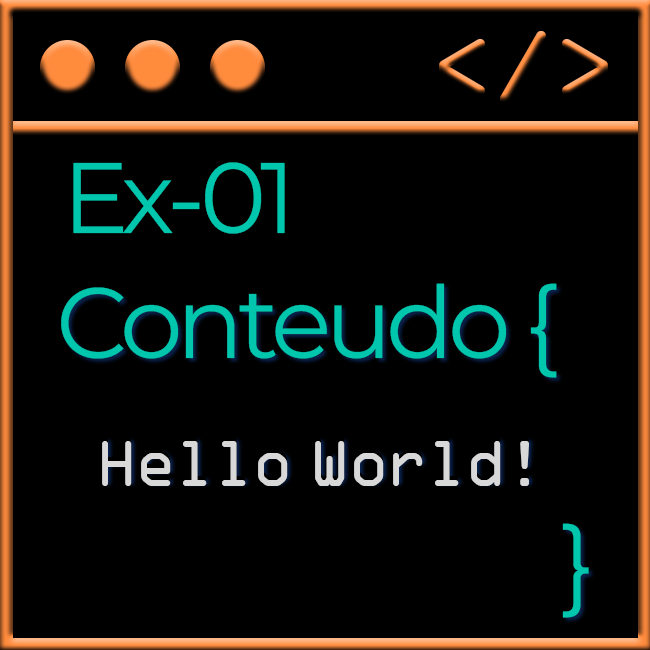
<style>
.page{position:relative;width:650px;height:650px;background:#000000}
.page>*{position:absolute;margin:0}
.t1{font:110px "OCRAbyBT-Regular";letter-spacing:-0.06em}
.t2{font:100px "MontserratThin-Regular";letter-spacing:-0.06em;color:#00c6ae}
.t3{font:70px "OCRAbyBT-Regular";letter-spacing:-0.06em;color:#d8d8d8}
</style>
<div class="page">
<p class="t1" style="left:439px;top:31px;width:169px;height:72px">&lt;/&gt;</p>
<p class="t2" style="left:73px;top:162px;width:212px;height:72px">Ex-01</p>
<p class="t2" style="left:61px;top:283px;width:528px;height:335px">Conteudo {<br><br>                         }</p>
<p class="t2" style="left:61px;top:283px;width:528px;height:335px">Conteudo {<br><br>                         }</p>
<p class="t3" style="left:102px;top:437px;width:427px;height:45px">Hello World!</p>
<p class="t3" style="left:102px;top:441px;width:427px;height:45px">Hello World!</p>
</div>
